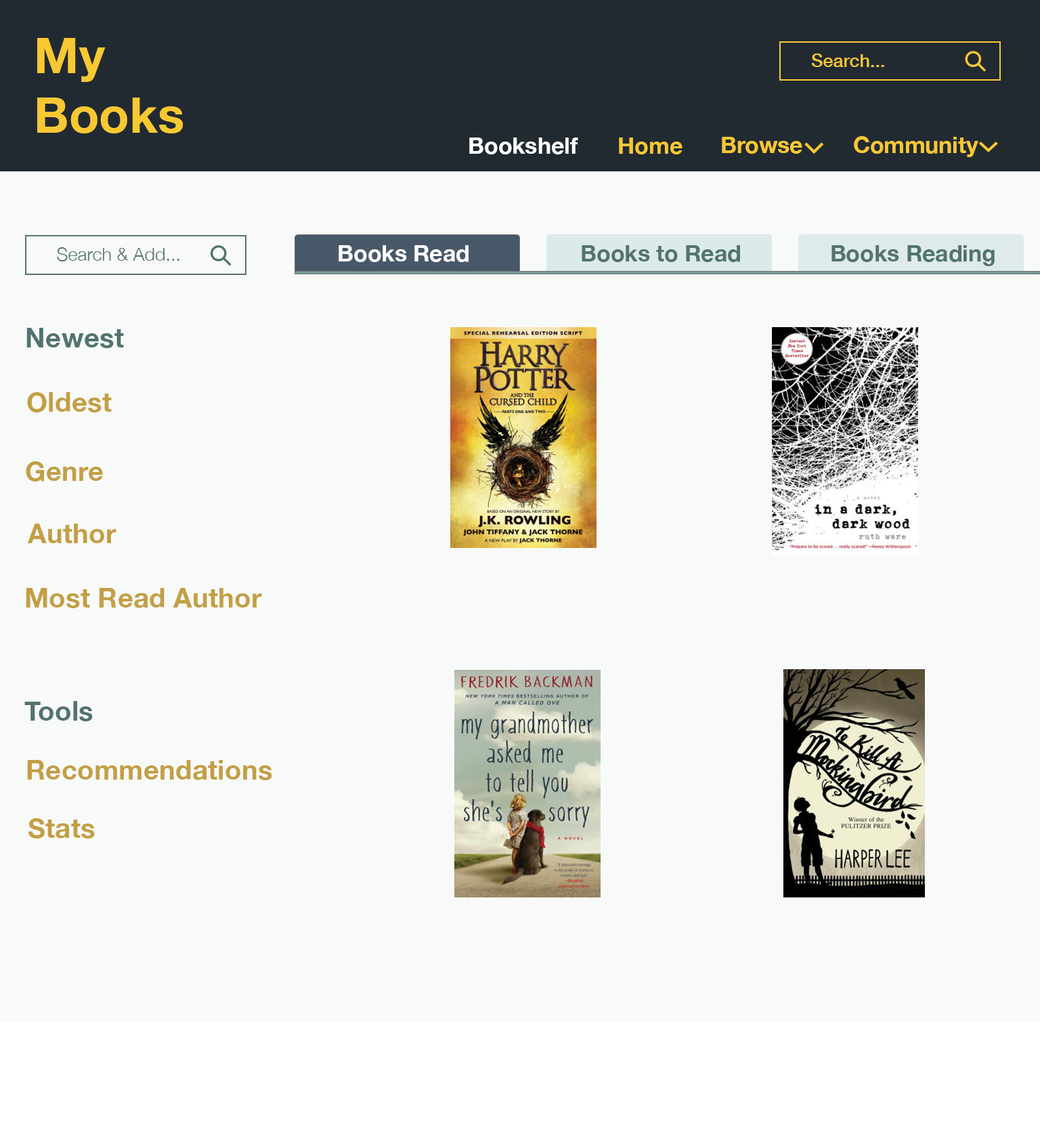
<style>
.page{position:relative;width:1040px;height:1146px;background:#f8fafa}
.page>*{position:absolute;margin:0}
.t1{font:49.5px "HelveticaNeue-Bold";color:#f8c833}
.t2{font:18.3px "HelveticaNeue-Medium";color:#f8c833}
.t3{font:22.9px "HelveticaNeue-Bold";color:#ffffff}
.t4{font:22.9px "HelveticaNeue-Bold";color:#f8c833}
.t5{font:22.9px "HelveticaNeue-Bold";color:#537370}
.t6{font:18.3px "HelveticaNeue-Light";color:#537370}
.t7{font:27.4px "HelveticaNeue-Bold";color:#537370}
.t8{font:27.4px "HelveticaNeue-Bold";color:#c39f44}
</style>
<div class="page">
<p class="t1" style="left:37px;top:38px;width:147px;height:95px">My <br>Books</p>
<p class="t2" style="left:811px;top:54px;width:74px;height:13px">Search...</p>
<p class="t3" style="left:469px;top:138px;width:109px;height:16px">Bookshelf</p>
<p class="t4" style="left:619px;top:138px;width:64px;height:16px">Home</p>
<p class="t4" style="left:722px;top:137px;width:81px;height:17px">Browse</p>
<p class="t4" style="left:854px;top:136px;width:125px;height:21px">Community</p>
<p class="t3" style="left:339px;top:245px;width:130px;height:17px">Books Read</p>
<p class="t5" style="left:582px;top:245px;width:158px;height:17px">Books to Read</p>
<p class="t5" style="left:832px;top:245px;width:163px;height:21px">Books Reading</p>
<p class="t6" style="left:57px;top:247px;width:123px;height:14px">Search &amp; Add...</p>
<p class="t7" style="left:26px;top:328px;width:98px;height:20px">Newest</p>
<p class="t8" style="left:27px;top:392px;width:85px;height:21px">Oldest</p>
<p class="t8" style="left:26px;top:461px;width:77px;height:21px">Genre</p>
<p class="t8" style="left:27px;top:524px;width:90px;height:19px">Author</p>
<p class="t8" style="left:26px;top:588px;width:236px;height:20px">Most Read Author</p>
<p class="t7" style="left:24px;top:701px;width:69px;height:20px">Tools</p>
<p class="t8" style="left:27px;top:760px;width:245px;height:20px">Recommendations</p>
<p class="t8" style="left:28px;top:818px;width:67px;height:21px">Stats</p>
</div>
